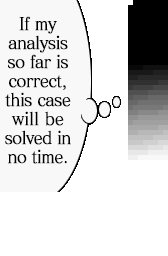
<style>
.page{position:relative;width:168px;height:256px;background:#ffffff}
.page>*{position:absolute;margin:0}
.t1{font:17.6px/19px "MatissePro-M";letter-spacing:-0.05em;color:#000000;font-weight:bold;scale:0.91 1}
.t2{font:17.6px/19px "MatissePro-M";letter-spacing:-0.01em;color:#000000;font-weight:bold;scale:0.91 1}
</style>
<div class="page">
<p class="t1" style="left:5px;top:16px;width:66px;height:148px;text-align:center">If my<br>analysis<br>so far is<br>correct,<br>this case<br><span class="t2">will be<br></span>solved in<br>no time.</p>
</div>
